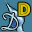
<style>
.page{position:relative;width:32px;height:32px}
.page>*{position:absolute;margin:0}
.t1{font:20px "Phosphate-Inline";color:#d6c300}
.t2{font:25px "SavoyeLetPlain";color:#aedce3}
</style>
<div class="page">
<p class="t1" style="left:18px;top:2px;width:13px;height:15px">D</p>
<p class="t2" style="left:1px;top:13px;width:17px;height:17px">D</p>
</div>
